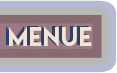
<style>
.page{position:relative;width:117px;height:73px;background:#b9b8b8}
.page>*{position:absolute;margin:0}
.t1{font:23.6px "LemonMilk";letter-spacing:0.05em;color:#f2e5d6}
</style>
<div class="page">
<p class="t1" style="left:9px;top:26px;width:83px;height:21px">Menue</p>
</div>
